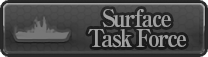
<style>
.page{position:relative;width:208px;height:57px}
.page>*{position:absolute;margin:0}
.t1{font:24px/20px "RyuminPro-ExBold";letter-spacing:-0.08em;color:#a1a1a1;scale:0.9 1}
</style>
<div class="page">
<p class="t1" style="left:88px;top:9px;width:98px;height:39px;text-align:center">Surface<br>Task Force</p>
</div>
